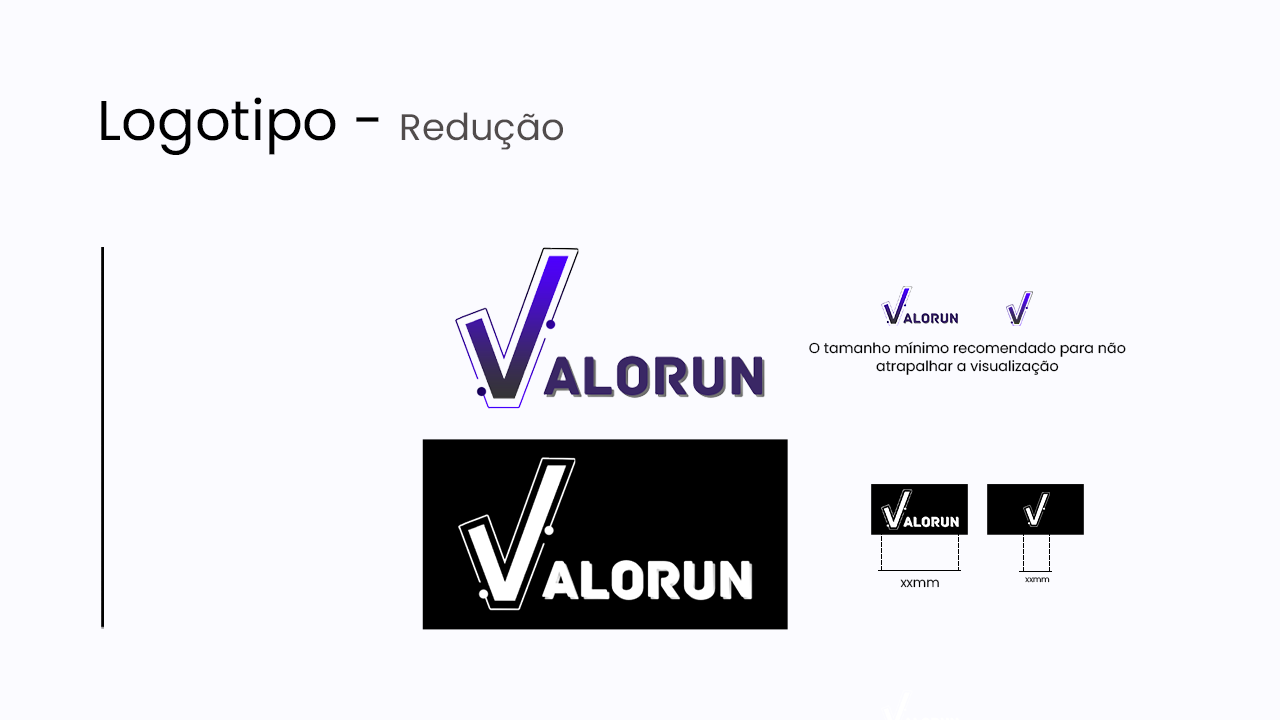
<style>
.page{position:relative;width:1280px;height:720px;background:#fbfbff}
.page>*{position:absolute;margin:0}
.t1{font:56px "Poppins-Regular";color:#000000}
.t2{font:37px "Poppins-Regular";color:#514c4c}
.t3{font:14.3px "Poppins-Regular";color:#000000}
.t4{font:13px "Poppins-Regular";color:#000000}
.t5{font:8px "Poppins-Regular"}
</style>
<div class="page">
<p class="t1" style="left:101px;top:97px;width:462px;height:58px">Logotipo - <span class="t2">Redução</span></p>
<p class="t3" style="left:809px;top:341px;width:317px;height:34px;text-align:center">O tamanho mínimo recomendado para não<br>atrapalhar a visualização</p>
<p class="t4" style="left:900px;top:579px;width:39px;height:9px">xxmm</p>
<p class="t5" style="left:1025px;top:577px;width:25px;height:6px">xxmm</p>
</div>
